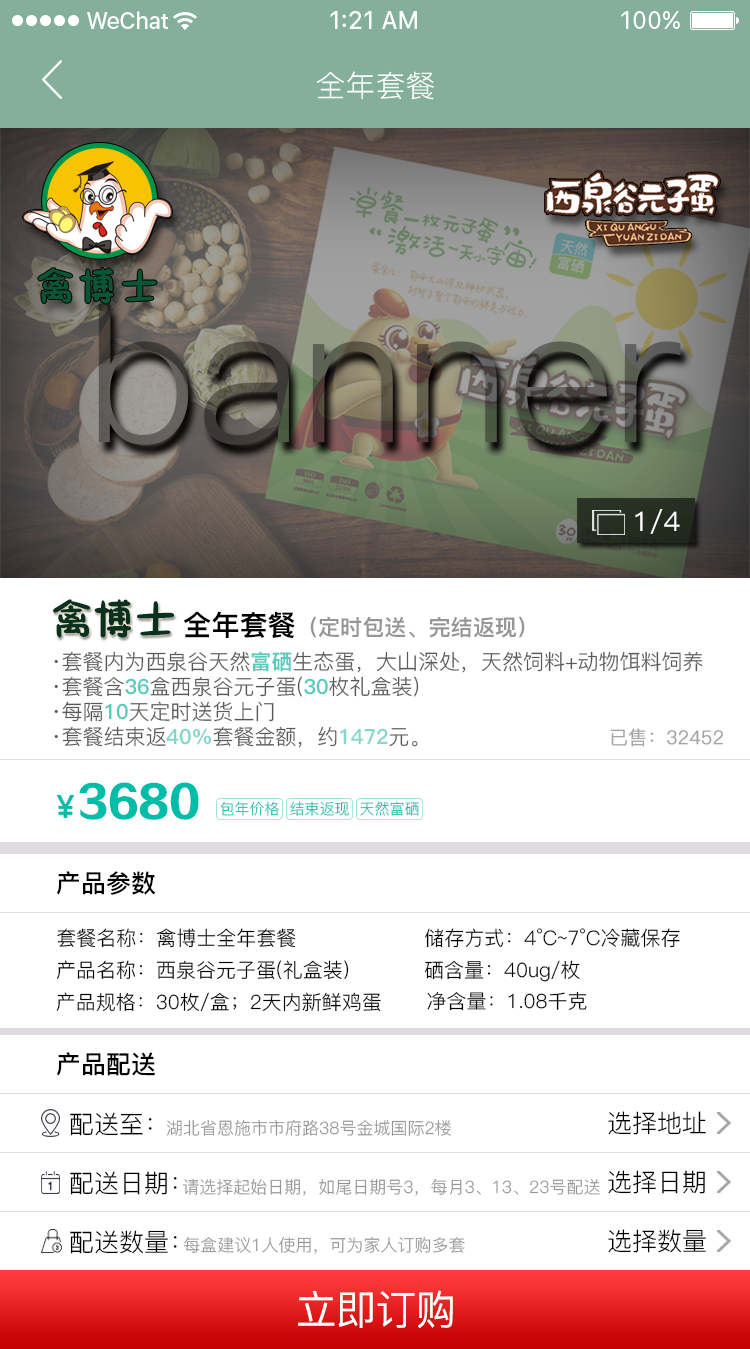
<style>
.page{position:relative;width:750px;height:1349px;background:#ffffff}
.page>*{position:absolute;margin:0}
.t1{font:30px "PingFang-SC-Regular";color:#ffffff;text-transform:uppercase}
.t2{font:189.4px "PingFang-SC-Regular"}
.t3{font:26.8px "PingFang-SC-Medium";color:#ffffff;scale:1.04 1}
.t4{font:42.2px "FZSEJW--GB1-0";color:#0a3020}
.t5{font:22px "PingFang-SC-Heavy";color:#969696}
.t6{font:28.1px "PingFang-SC-Heavy";color:#000000}
.t7{font:20.9px/25px "PingFang-SC-Regular"}
.t8{font:20.9px/25px "PingFang-SC-Heavy"}
.t9{font:18.9px "PingFang-SC-Regular";color:#a5a5a5;font-weight:bold}
.t10{font:42.4px "FZZDHJW--GB1-0";color:#00bdaa}
.t11{font:15px "PingFang-SC-Regular";color:#00bdaa}
.t12{font:25px "PingFang-SC-Bold";color:#000000}
.t13{font:20px "PingFang-SC-Regular";color:#000000}
.t14{font:19.8px "PingFang-SC-Regular";color:#000000}
.t15{font:19.7px "PingFang-SC-Regular";color:#000000}
.t16{font:19.5px "PingFang-SC-Regular";color:#000000}
.t17{font:25px "PingFang-SC-Regular";color:#000000}
.t18{font:17px "PingFang-SC-Regular";color:#969696}
.t19{font:40.7px "PingFang-SC-Medium";color:#ffffff}
</style>
<div class="page">
<p class="t1" style="left:316px;top:71px;width:118px;height:29px">全年套餐</p>
<p class="t2" style="left:98px;top:304px;width:583px;height:141px">banner</p>
<p class="t3" style="left:635px;top:509px;width:45px;height:25px">1/4</p>
<p class="t4" style="left:53px;top:599px;width:121px;height:39px">禽博士</p>
<p class="t5" style="left:184px;top:611px;width:341px;height:27px"><span class="t6">全年套餐</span>（定时包送、完结返现）</p>
<p class="t7" style="left:54px;top:651px;width:649px;height:97px">·套餐内为西泉谷天然<span class="t8">富硒</span>生态蛋，大山深处，天然饲料+动物饵料饲养<br>·套餐含<span class="t8">36</span>盒西泉谷元子蛋(<span class="t8">30</span>枚礼盒装)<br>·每隔<span class="t8">10</span>天定时送货上门<br>·套餐结束返<span class="t8">40%</span>套餐金额，约<span class="t8">1472</span>元。</p>
<p class="t9" style="left:610px;top:728px;width:113px;height:19px">已售：32452</p>
<p class="t10" style="left:79px;top:782px;width:120px;height:38px">3680</p>
<p class="t11" style="left:220px;top:801px;width:59px;height:15px">包年价格</p>
<p class="t11" style="left:290px;top:801px;width:59px;height:15px">结束返现</p>
<p class="t11" style="left:360px;top:801px;width:59px;height:15px">天然富硒</p>
<p class="t12" style="left:56px;top:871px;width:100px;height:24px">产品参数</p>
<p class="t13" style="left:57px;top:928px;width:239px;height:20px">套餐名称：禽博士全年套餐</p>
<p class="t13" style="left:425px;top:928px;width:255px;height:20px">储存方式：4°C~7°C冷藏保存</p>
<p class="t14" style="left:56px;top:960px;width:293px;height:20px">产品名称：西泉谷元子蛋(礼盒装)</p>
<p class="t14" style="left:424px;top:960px;width:156px;height:22px">硒含量：40ug/枚</p>
<p class="t15" style="left:56px;top:992px;width:325px;height:20px">产品规格：30枚/盒；2天内新鲜鸡蛋</p>
<p class="t16" style="left:427px;top:991px;width:160px;height:20px">净含量：1.08千克</p>
<p class="t12" style="left:56px;top:1052px;width:99px;height:24px">产品配送</p>
<p class="t17" style="left:70px;top:1112px;width:82px;height:24px">配送至：</p>
<p class="t18" style="left:167px;top:1119px;width:284px;height:17px">湖北省恩施市市府路38号金城国际2楼</p>
<p class="t17" style="left:608px;top:1111px;width:98px;height:24px">选择地址</p>
<p class="t17" style="left:70px;top:1171px;width:107px;height:24px">配送日期：</p>
<p class="t18" style="left:182px;top:1178px;width:418px;height:18px">请选择起始日期，如尾日期号3，每月3、13、23号配送</p>
<p class="t17" style="left:608px;top:1170px;width:97px;height:24px">选择日期</p>
<p class="t17" style="left:70px;top:1230px;width:107px;height:24px">配送数量：</p>
<p class="t17" style="left:608px;top:1229px;width:98px;height:24px">选择数量</p>
<p class="t18" style="left:183px;top:1236px;width:282px;height:18px">每盒建议1人使用，可为家人订购多套</p>
<p class="t19" style="left:298px;top:1290px;width:155px;height:38px">立即订购</p>
</div>
